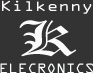
<style>
.page{position:relative;width:93px;height:73px;background:#333333}
.page>*{position:absolute;margin:0}
.t1{font:13.1px "OCRAStd";letter-spacing:-0.025em;color:#fcf9f9;scale:1.27 1}
.t2{font:48.5px "OldEnglishTextMT";letter-spacing:-0.025em;color:#fbfbfb;scale:1.47 1}
.t3{font:12.4px "OCRAStd";letter-spacing:-0.025em;color:#fdfefe;scale:1.11 1}
</style>
<div class="page">
<p class="t1" style="left:2px;top:0px;width:90px;height:14px">Kilkenny</p>
<p class="t2" style="left:19px;top:20px;width:58px;height:37px">K</p>
<p class="t3" style="left:0px;top:63px;width:93px;height:11px">ELECRONICS</p>
</div>
